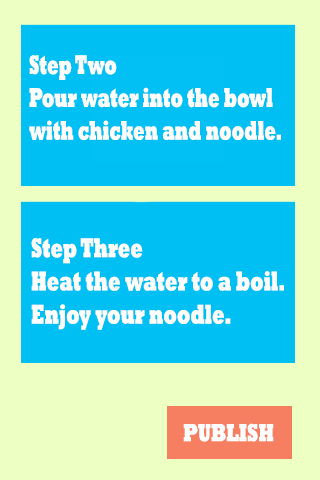
<style>
.page{position:relative;width:320px;height:480px;background:#00bff3}
.page>*{position:absolute;margin:0}
.t1{font:27.4px "Rockwell-ExtraBold";color:#ffffff;scale:0.61 1}
.t2{font:27.6px "Rockwell-ExtraBold";color:#ffffff;scale:0.65 1}
.t3{font:25.2px "Rockwell-ExtraBold";color:#ffffff;scale:0.71 1}
</style>
<div class="page">
<p class="t1" style="left:29px;top:55px;width:252px;height:85px">Step Two<br>Pour water into the bowl<br>with chicken and noodle.</p>
<p class="t2" style="left:31px;top:238px;width:253px;height:92px">Step Three<br>Heat the water to a boil.<br>Enjoy your noodle.</p>
<p class="t3" style="left:183px;top:423px;width:91px;height:19px">PUBLISH</p>
</div>
